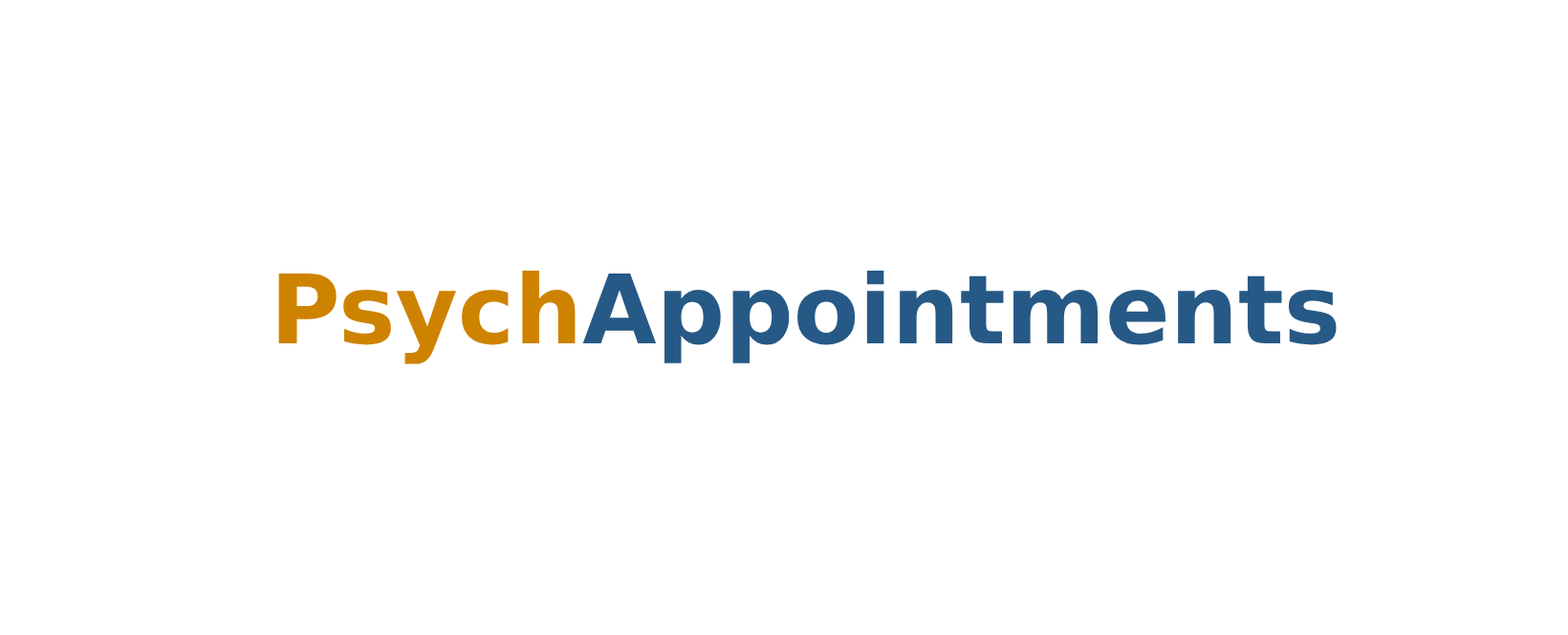
<style>
.page{position:relative;width:1568px;height:635px;background:#ffffff}
.page>*{position:absolute;margin:0}
.t1{font:95.6px "DejaVuSans-Bold";color:#265985}
.t2{font:95.6px "DejaVuSans-Bold";color:#ce8300}
</style>
<div class="page">
<p class="t1" style="left:278px;top:271px;width:1059px;height:93px"><span class="t2">Psych</span>Appointments</p>
</div>
